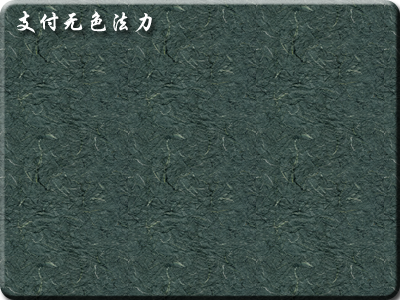
<style>
.page{position:relative;width:400px;height:300px}
.page>*{position:absolute;margin:0}
.t1{font:24px "STXingkai";color:#ffffff}
</style>
<div class="page">
<p class="t1" style="left:17px;top:11px;width:135px;height:22px">支付无色法力</p>
</div>
